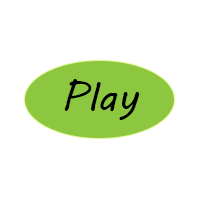
<style>
.page{position:relative;width:200px;height:200px;background:#ffffff}
.page>*{position:absolute;margin:0}
.t1{font:40px "MVBoli";color:#000000}
</style>
<div class="page">
<p class="t1" style="left:64px;top:79px;width:76px;height:41px">Play</p>
</div>
